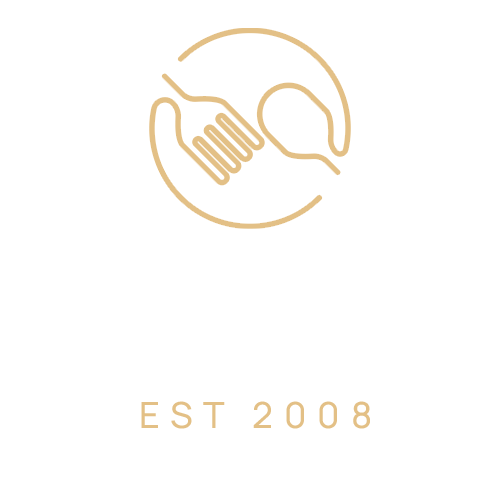
<style>
.page{position:relative;width:500px;height:500px;background:#ffffff}
.page>*{position:absolute;margin:0}
.t1{font:36px "Manrope-Medium";letter-spacing:0.3em;color:#e3c086}
</style>
<div class="page">
<p class="t1" style="left:141px;top:401px;width:229px;height:28px">EST 2008</p>
</div>
